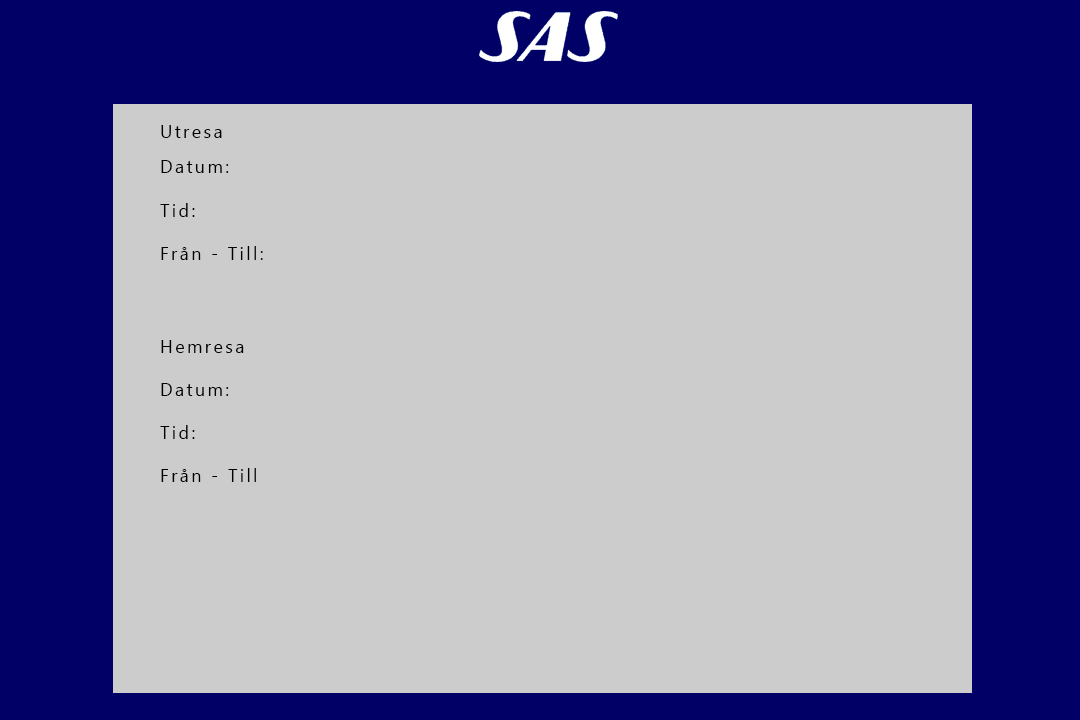
<style>
.page{position:relative;width:1080px;height:720px;background:#cccccc}
.page>*{position:absolute;margin:0}
.t1{font:18px "Gadugi";letter-spacing:0.13em;color:#000000}
</style>
<div class="page">
<p class="t1" style="left:161px;top:125px;width:61px;height:13px">Utresa</p>
<p class="t1" style="left:160px;top:160px;width:103px;height:100px">Datum: <br><br>Tid:<br><br>Från - Till:</p>
<p class="t1" style="left:160px;top:340px;width:96px;height:142px">Hemresa<br><br>Datum:<br><br>Tid: <br><br>Från - Till</p>
</div>
